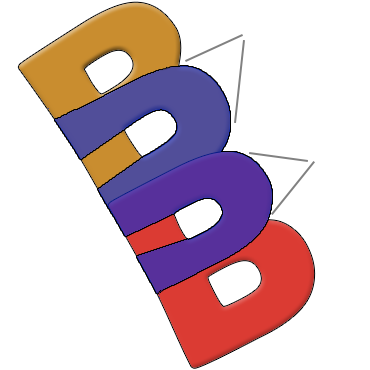
<style>
.page{position:relative;width:370px;height:370px;background:#ffffff}
.page>*{position:absolute;margin:0}
.t1{font:272.1px "BerlinSansFBDemi-Bold"}
</style>
<div class="page">
<p class="t1" style="left:18px;top:2px;width:212px;height:219px;rotate:-33deg">B</p>
<p class="t1" style="left:18px;top:2px;width:212px;height:219px;rotate:-33deg">B</p>
<p class="t1" style="left:108px;top:152px;width:207px;height:216px;rotate:-27deg">B</p>
<p class="t1" style="left:108px;top:152px;width:207px;height:216px;rotate:-27deg">B</p>
</div>
